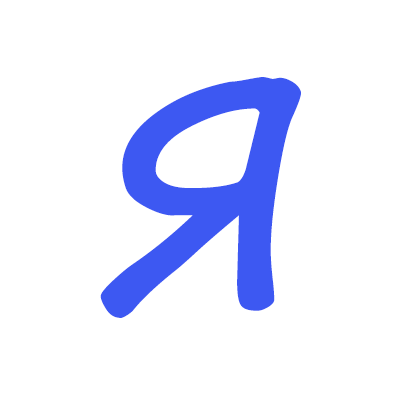
<style>
.page{position:relative;width:400px;height:400px;background:#ffffff}
.page>*{position:absolute;margin:0}
.t1{font:420px "SegoePrint";color:#3d58f2}
</style>
<div class="page">
<p class="t1" style="left:100px;top:77px;width:201px;height:241px">я</p>
</div>
